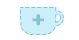
<style>
.page{position:relative;width:79px;height:40px;background:#ffffff}
.page>*{position:absolute;margin:0}
.t1{font:20.4px "ArialRoundedMTBold";letter-spacing:-0.05em;color:#86c2da;font-weight:bold;scale:1.03 1}
</style>
<div class="page">
<p class="t1" style="left:32px;top:14px;width:12px;height:12px">+</p>
</div>
